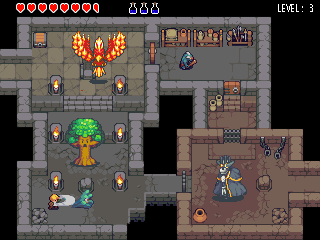
<style>
.page{position:relative;width:320px;height:240px;background:#000000}
.page>*{position:absolute;margin:0}
.t1{font:10px "Monaco";letter-spacing:-0.05em;color:#ffffff;scale:0.84 1}
</style>
<div class="page">
<p class="t1" style="left:278px;top:4px;width:35px;height:8px">LEVEL: 3</p>
</div>
